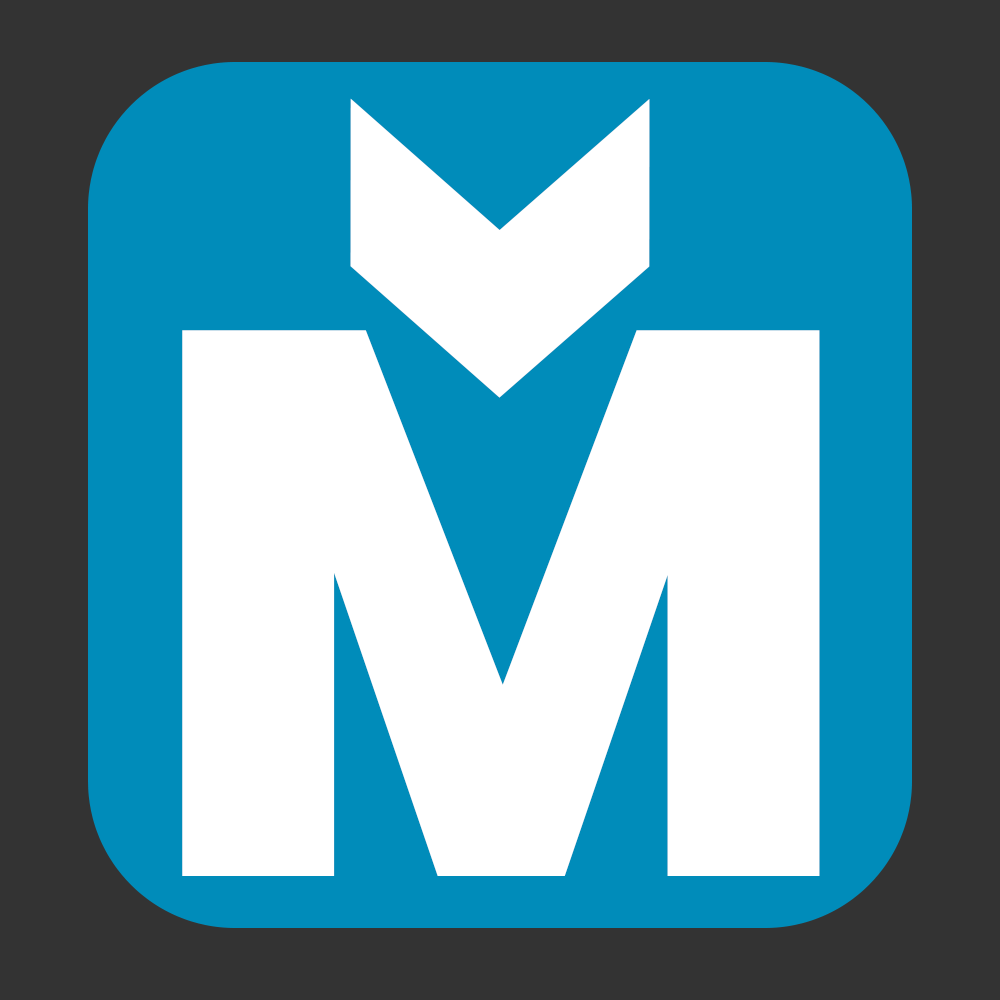
<style>
.page{position:relative;width:1000px;height:1000px;background:#008cba}
.page>*{position:absolute;margin:0}
.t1{font:683.3px "Poppins-ExtraBold";color:#ffffff}
.t2{font:774px "Poppins-ExtraBold";color:#ffffff}
</style>
<div class="page">
<p class="t1" style="left:350px;top:98px;width:300px;height:300px;rotate:90deg">&gt;</p>
<p class="t2" style="left:182px;top:330px;width:638px;height:546px">M</p>
</div>
